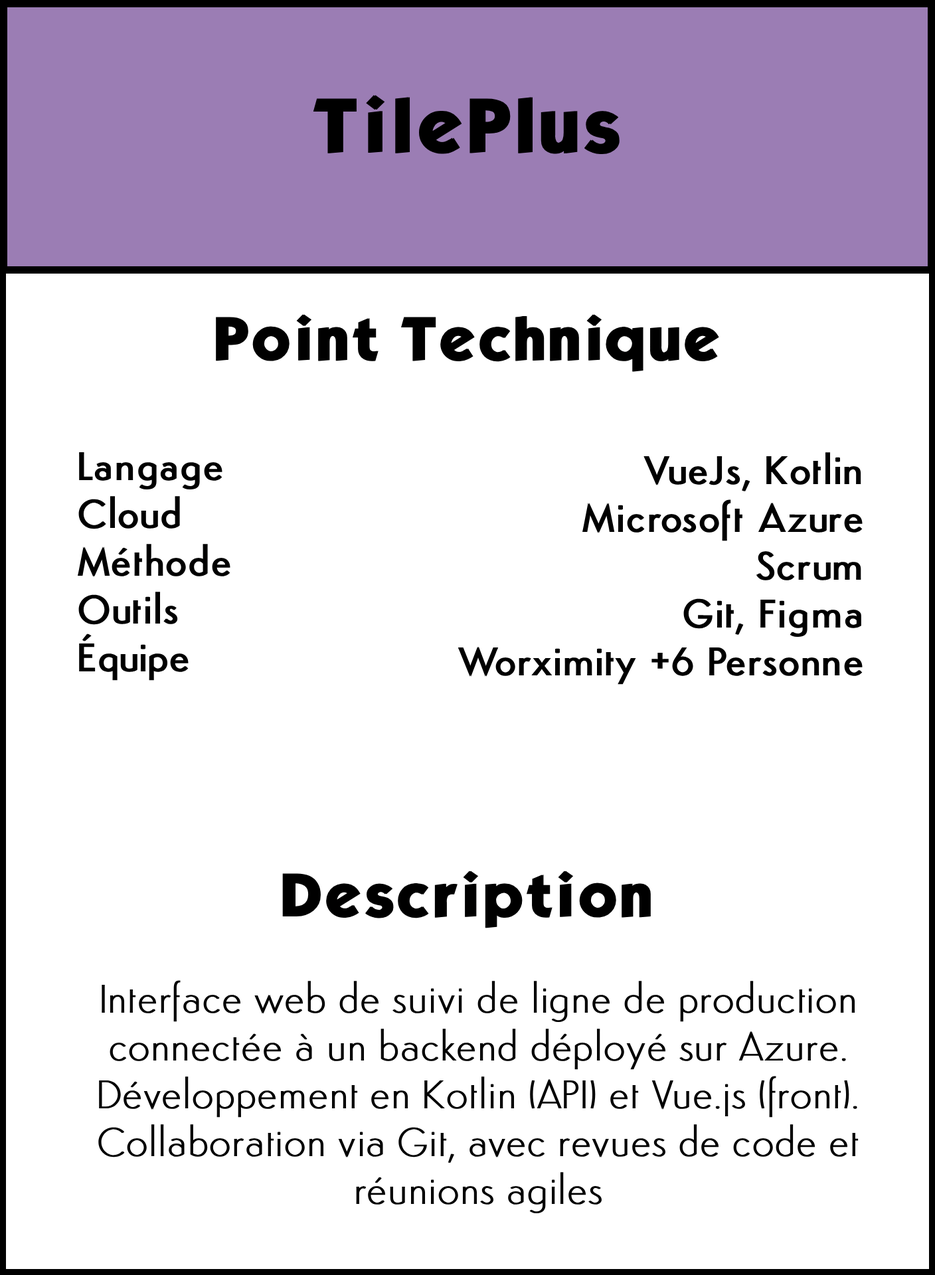
<style>
.page{position:relative;width:935px;height:1275px;background:#ffffff}
.page>*{position:absolute;margin:0}
.t1{font:66.4px "KabelBdNormal";color:#000000;font-weight:bold}
.t2{font:53.1px "KabelBdNormal";color:#000000;font-weight:bold}
.t3{font:39.8px "Semplicita-Medium";color:#000000;font-weight:bold}
.t4{font:39.8px "Semplicita-Light";color:#000000;font-weight:bold}
</style>
<div class="page">
<p class="t1" style="left:313px;top:95px;width:307px;height:60px">TilePlus</p>
<p class="t2" style="left:216px;top:314px;width:503px;height:58px">Point Technique</p>
<p class="t3" style="left:78px;top:452px;width:152px;height:229px">Langage<br>Cloud<br>Méthode<br>Outils<br>Équipe</p>
<p class="t3" style="left:458px;top:452px;width:405px;height:233px;text-align:right">VueJs, Kotlin<br>Microsoft Azure<br>Scrum<br>Git, Figma<br>Worximity +6 Personne</p>
<p class="t2" style="left:282px;top:871px;width:369px;height:57px">Description</p>
<p class="t4" style="left:98px;top:980px;width:761px;height:233px;text-align:center">Interface web de suivi de ligne de production connectée à un backend déployé sur Azure. Développement en Kotlin (API) et Vue.js (front). Collaboration via Git, avec revues de code et réunions agiles</p>
</div>
